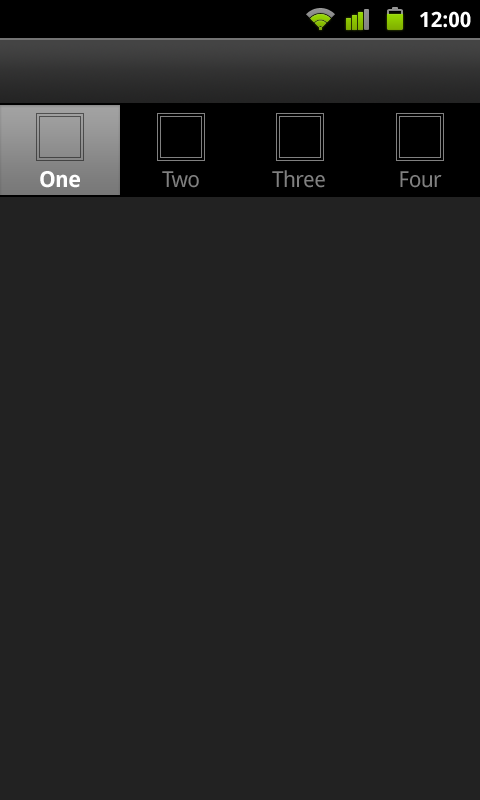
<style>
.page{position:relative;width:480px;height:800px;background:#222222}
.page>*{position:absolute;margin:0}
.t1{font:21px "DroidSans-Bold";color:#ffffff}
.t2{font:22px "DroidSans-Bold";letter-spacing:-0.025em;color:#ffffff}
.t3{font:22px "DroidSans";letter-spacing:-0.025em;color:#808080}
</style>
<div class="page">
<p class="t1" style="left:420px;top:11px;width:51px;height:17px">12:00</p>
<p class="t2" style="left:40px;top:171px;width:40px;height:17px">One</p>
<p class="t3" style="left:162px;top:171px;width:37px;height:17px">Two</p>
<p class="t3" style="left:272px;top:170px;width:53px;height:18px">Three</p>
<p class="t3" style="left:400px;top:171px;width:42px;height:17px">Four</p>
</div>
